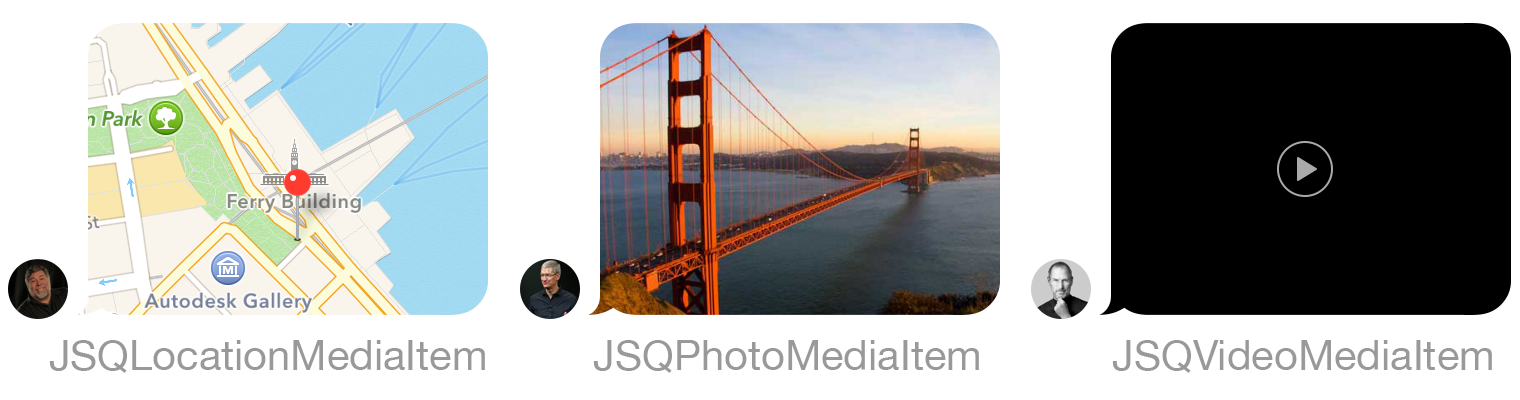
<style>
.page{position:relative;width:1520px;height:400px;background:#ffffff}
.page>*{position:absolute;margin:0}
.t1{font:41.7px "HelveticaNeue";color:#999999}
</style>
<div class="page">
<p class="t1" style="left:49px;top:340px;width:436px;height:33px">JSQLocationMediaItem</p>
<p class="t1" style="left:593px;top:340px;width:386px;height:33px">JSQPhotoMediaItem</p>
<p class="t1" style="left:1112px;top:340px;width:380px;height:33px">JSQVideoMediaItem</p>
</div>
